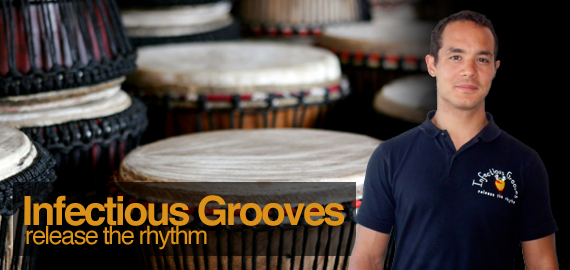
<style>
.page{position:relative;width:570px;height:270px}
.page>*{position:absolute;margin:0}
.t1{font:40.2px "Helvetica-Bold";letter-spacing:-0.06em;color:#dc9119}
.t2{font:25.2px "Helvetica";letter-spacing:-0.06em;color:#dc9119}
</style>
<div class="page">
<p class="t1" style="left:24px;top:195px;width:321px;height:31px">Infectious Grooves</p>
<p class="t2" style="left:26px;top:225px;width:181px;height:25px">release the rhythm</p>
</div>
